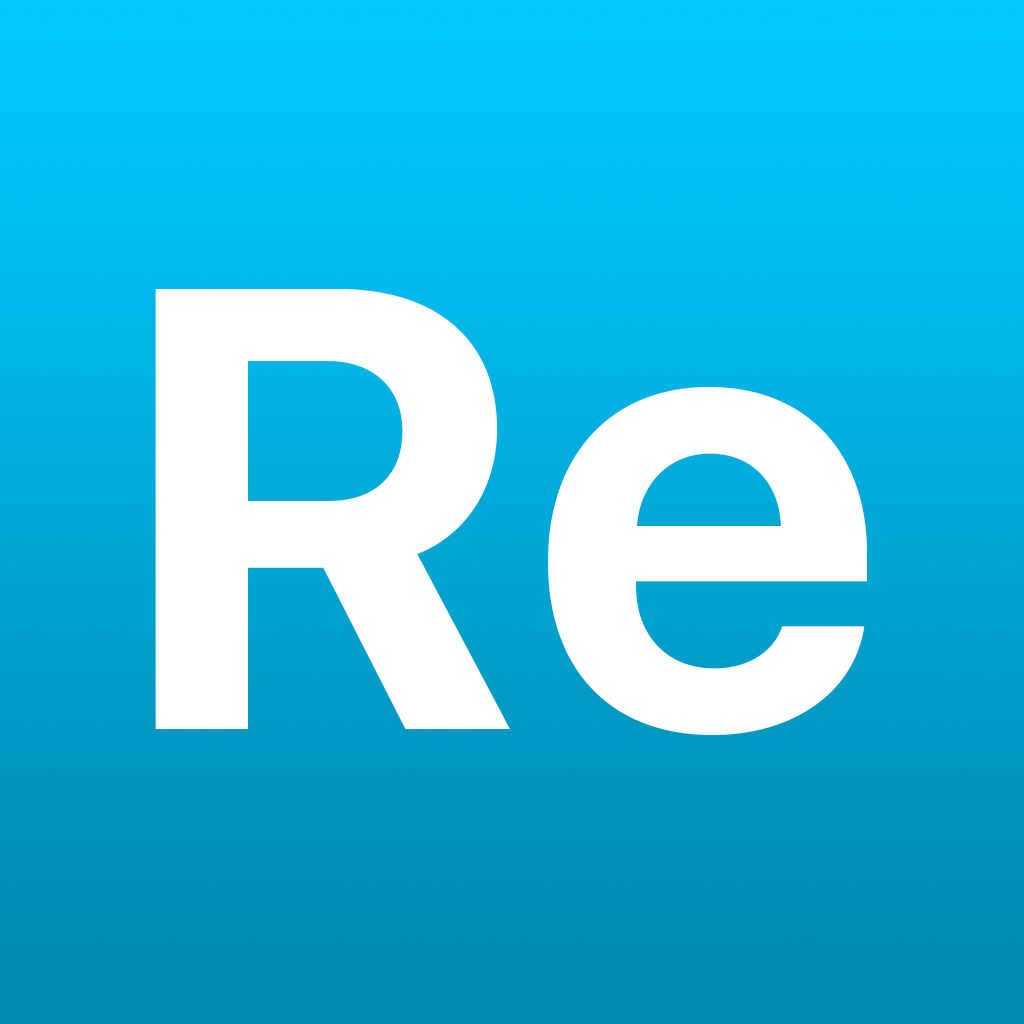
<style>
.page{position:relative;width:1024px;height:1024px}
.page>*{position:absolute;margin:0}
.t1{font:625px "SFUIDisplay-Bold";letter-spacing:0.02em;color:#ffffff}
</style>
<div class="page">
<p class="t1" style="left:155px;top:289px;width:712px;height:446px">Re</p>
</div>
